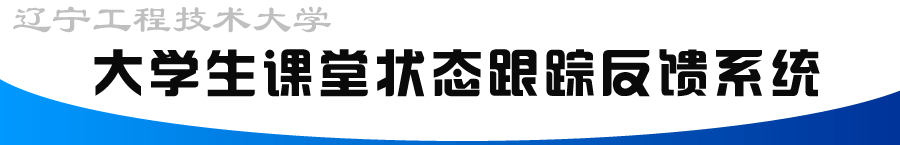
<style>
.page{position:relative;width:900px;height:145px;background:#ffffff}
.page>*{position:absolute;margin:0}
.t1{font:40px "LiSu";color:#bfbfbf}
.t2{font:50px "FZHZGBJW--GB1-0";letter-spacing:0.13em;color:#0a0a0a}
</style>
<div class="page">
<p class="t1" style="left:13px;top:6px;width:318px;height:27px">辽宁工程技术大学</p>
<p class="t2" style="left:94px;top:49px;width:726px;height:48px">大学生课堂状态跟踪反馈系统</p>
</div>
